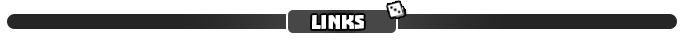
<style>
.page{position:relative;width:692px;height:44px;background:#ffffff}
.page>*{position:absolute;margin:0}
.t1{font:22.5px "Troika";color:#ffffff}
</style>
<div class="page">
<p class="t1" style="left:312px;top:15px;width:52px;height:14px">LINKS</p>
</div>
